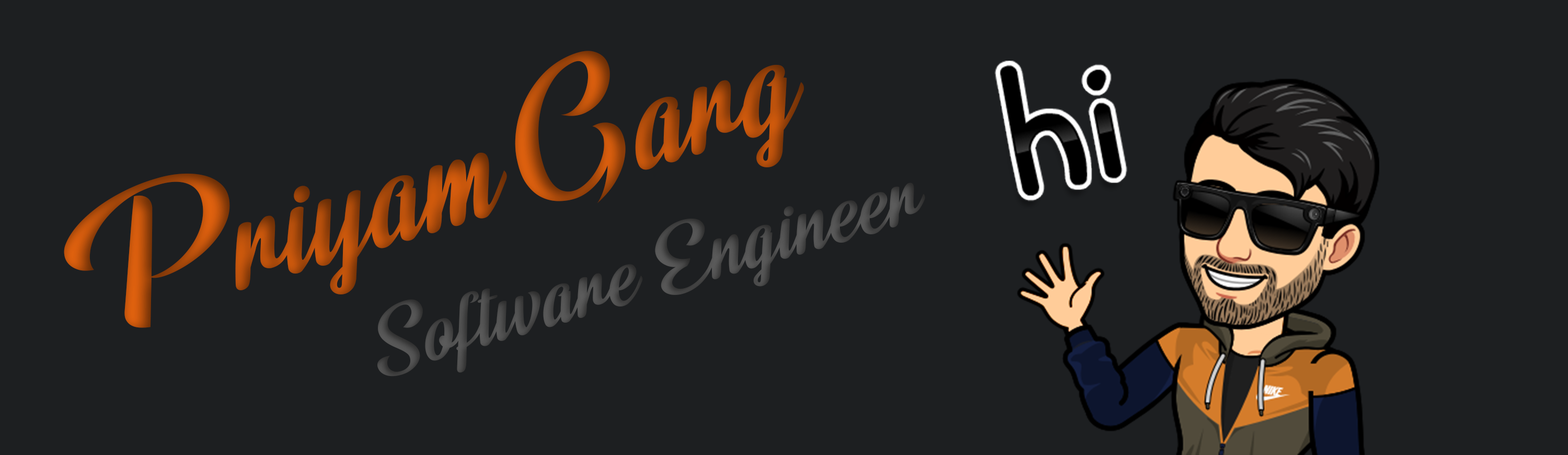
<style>
.page{position:relative;width:1568px;height:455px;background:#1d1f21}
.page>*{position:absolute;margin:0}
.t1{font:217.8px "LemonJellyPersonalUse";scale:0.84 1}
.t2{font:261.3px "LemonJellyPersonalUse";scale:0.84 1}
.t3{font:130.8px "LemonJellyPersonalUse";color:#4b4b4b;scale:0.86 1}
</style>
<div class="page">
<p class="t1" style="left:64px;top:51px;width:740px;height:277px;rotate:-17deg"><span class="t2">P</span>riyam <span class="t2">G</span>arg</p>
<p class="t3" style="left:377px;top:182px;width:548px;height:194px;rotate:-16deg">Software Engineer</p>
</div>
